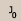
<style>
.page{position:relative;width:21px;height:21px;background:#d9cdc1}
.page>*{position:absolute;margin:0}
.t1{font:9px "Tahoma";color:#000000}
.t2{font:8px "Tahoma";color:#000000}
</style>
<div class="page">
<p class="t1" style="left:9px;top:6px;width:4px;height:8px">J</p>
<p class="t2" style="left:12px;top:12px;width:5px;height:7px">0</p>
</div>
